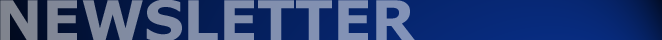
<style>
.page{position:relative;width:662px;height:40px}
.page>*{position:absolute;margin:0}
.t1{font:56px "Verdana-Bold";letter-spacing:-0.005em;color:#828da8}
</style>
<div class="page">
<p class="t1" style="left:0px;top:0px;width:416px;height:42px">NEWSLETTER</p>
</div>
